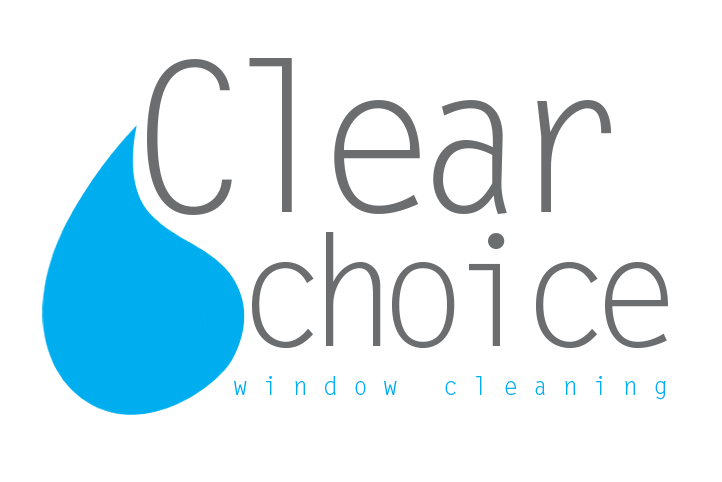
<style>
.page{position:relative;width:722px;height:482px;background:#ffffff}
.page>*{position:absolute;margin:0}
.t1{font:208.3px "LetterGothicStd";letter-spacing:-0.14em;color:#6c6d6f}
.t2{font:208.3px "LetterGothicStd";letter-spacing:-0.38em;color:#6c6d6f}
.t3{font:154.2px "LetterGothicStd";letter-spacing:-0.14em;color:#6c6d6f}
.t4{font:25px "LetterGothicStd";letter-spacing:0.6em;color:#00adef}
</style>
<div class="page">
<p class="t1" style="left:147px;top:58px;width:464px;height:157px">C<span class="t2">l </span>ear</p>
<p class="t3" style="left:252px;top:232px;width:416px;height:117px">choice</p>
<p class="t4" style="left:234px;top:376px;width:432px;height:24px">window cleaning</p>
</div>
